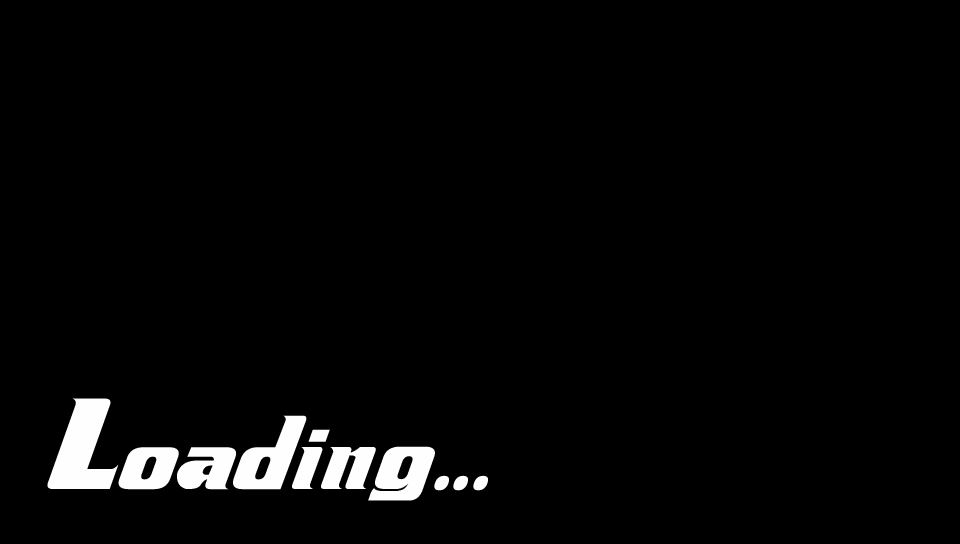
<style>
.page{position:relative;width:960px;height:544px;background:#000000}
.page>*{position:absolute;margin:0}
.t1{font:100px "-Xenogears";color:#fefefe}
</style>
<div class="page">
<p class="t1" style="left:47px;top:398px;width:441px;height:103px">Loading...</p>
</div>
